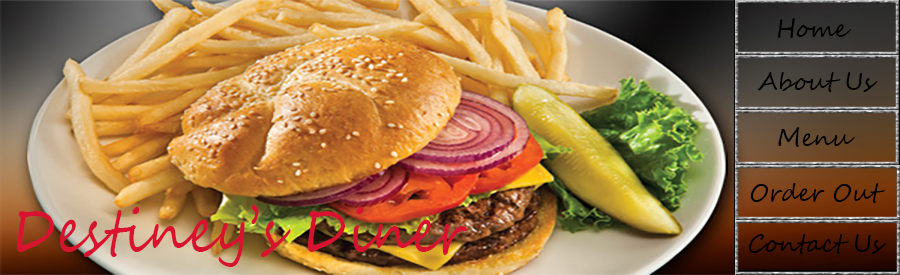
<style>
.page{position:relative;width:900px;height:275px}
.page>*{position:absolute;margin:0}
.t1{font:24px "SegoeScript";color:#000000}
.t2{font:60px "SegoeScript";color:#d7132f;scale:0.87 1}
</style>
<div class="page">
<p class="t1" style="left:777px;top:18px;width:74px;height:20px">Home</p>
<p class="t1" style="left:757px;top:72px;width:121px;height:20px">About Us</p>
<p class="t1" style="left:778px;top:127px;width:77px;height:20px">Menu</p>
<p class="t1" style="left:750px;top:183px;width:135px;height:20px">Order Out</p>
<p class="t2" style="left:16px;top:204px;width:451px;height:63px">Destiney’s Diner</p>
<p class="t1" style="left:748px;top:234px;width:138px;height:20px">Contact Us</p>
</div>
